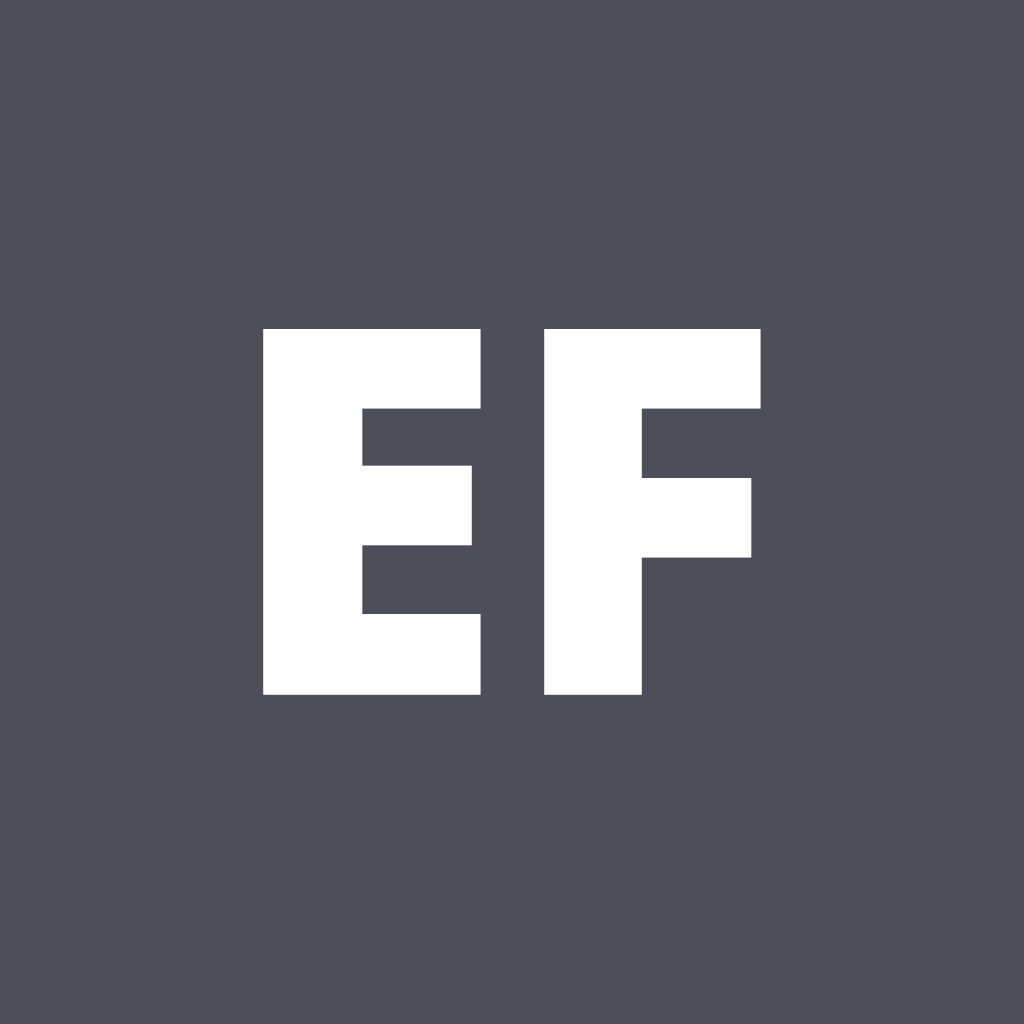
<style>
.page{position:relative;width:1024px;height:1024px;background:#4e4e5b}
.page>*{position:absolute;margin:0}
.t1{font:512px "OpenSans-Extrabold";color:#ffffff}
</style>
<div class="page">
<p class="t1" style="left:263px;top:329px;width:498px;height:366px">EF</p>
</div>
